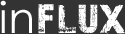
<style>
.page{position:relative;width:125px;height:34px;background:#333333}
.page>*{position:absolute;margin:0}
.t1{font:43px "CenturyGothic";letter-spacing:0.025em;color:#ffffff}
.t2{font:43px "28-Days-Later-Regular";letter-spacing:0.025em;color:#ffffff}
</style>
<div class="page">
<p class="t1" style="left:0px;top:0px;width:32px;height:33px">in</p>
<p class="t2" style="left:38px;top:4px;width:87px;height:30px">flux</p>
</div>
